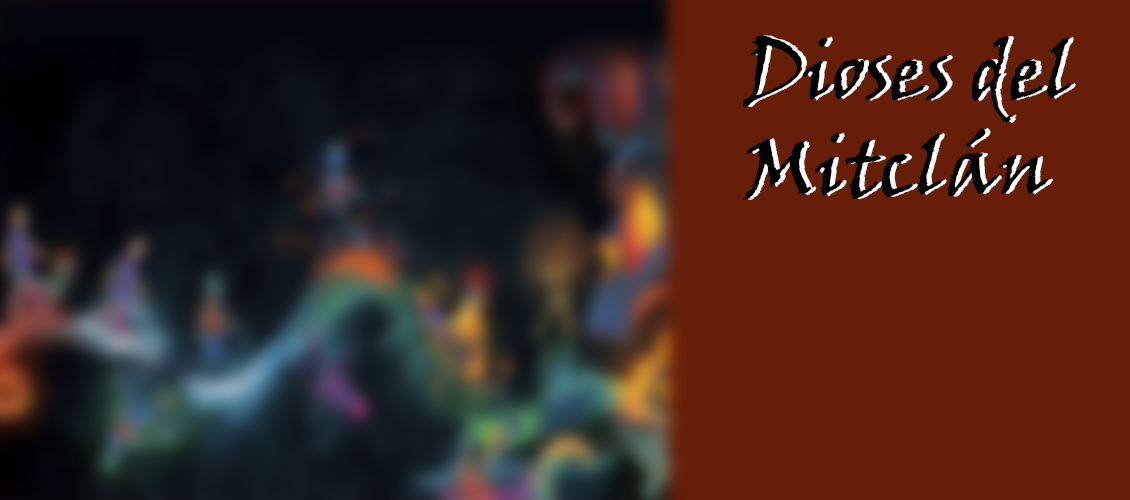
<style>
.page{position:relative;width:1130px;height:500px;background:#661e08}
.page>*{position:absolute;margin:0}
.t1{font:80px "VinerHandITC";color:#000000}
.t2{font:80px "VinerHandITC"}
</style>
<div class="page">
<p class="t1" style="left:743px;top:35px;width:328px;height:165px">Dioses del <br>Mitclán</p>
<p class="t2" style="left:748px;top:35px;width:328px;height:165px">Dioses del <br>Mitclán</p>
</div>
